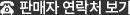
<style>
.page{position:relative;width:130px;height:15px;background:#333333}
.page>*{position:absolute;margin:0}
.t1{font:15px "NotoSansCJKkr-Medium";letter-spacing:-0.03em;color:#ffffff}
</style>
<div class="page">
<p class="t1" style="left:19px;top:0px;width:111px;height:15px">판매자 연락처 보기</p>
</div>
